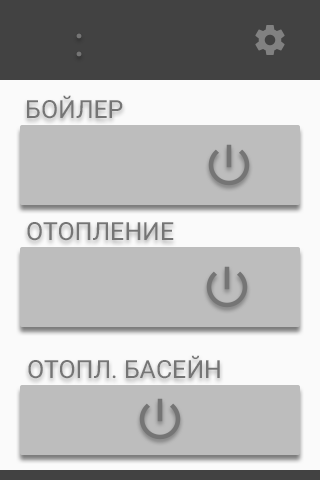
<style>
.page{position:relative;width:320px;height:480px;background:#bdbdbd}
.page>*{position:absolute;margin:0}
.t1{font:41.7px "Roboto-Regular";color:#757575}
.t2{font:25px "Roboto-Regular";color:#757575}
</style>
<div class="page">
<p class="t1" style="left:76px;top:33px;width:6px;height:24px">:</p>
<p class="t2" style="left:27px;top:95px;width:96px;height:24px">БОЙЛЕР</p>
<p class="t2" style="left:27px;top:222px;width:147px;height:19px">ОТОПЛЕНИЕ</p>
<p class="t2" style="left:28px;top:355px;width:192px;height:24px">ОТОПЛ. БАСЕЙН</p>
</div>
